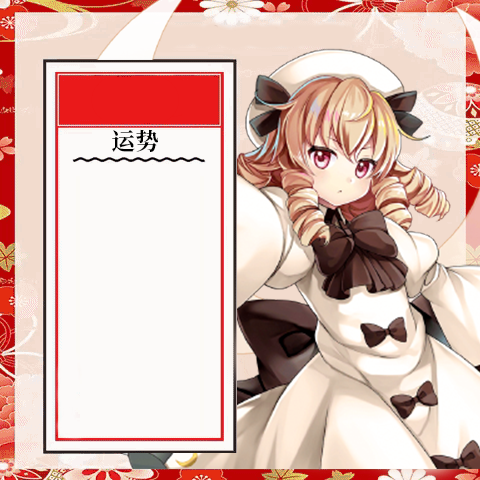
<style>
.page{position:relative;width:480px;height:480px;background:#fcfaf9}
.page>*{position:absolute;margin:0}
.t1{font:24px "NotoSerifSC-Bold";color:#000000}
</style>
<div class="page">
<p class="t1" style="left:112px;top:129px;width:46px;height:23px">运势</p>
</div>
